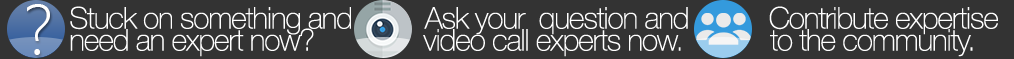
<style>
.page{position:relative;width:1014px;height:59px;background:#333333}
.page>*{position:absolute;margin:0}
.t1{font:70px "SegoeUI-Light";color:#ffffff}
.t2{font:30px/22px "HelveticaNeue-Thin";letter-spacing:-0.035em;color:#ffffff}
</style>
<div class="page">
<p class="t1" style="left:27px;top:4px;width:23px;height:51px">?</p>
<p class="t2" style="left:70px;top:6px;width:928px;height:51px">Stuck on something and          Ask your  question and           Contribute expertise<br>need an expert now?               video call experts now.            to the community.</p>
</div>
